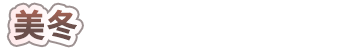
<style>
.page{position:relative;width:360px;height:50px;background:#ffffff}
.page>*{position:absolute;margin:0}
.t1{font:32px "SourceHanSansSC-Bold";font-weight:bold}
</style>
<div class="page">
<p class="t1" style="left:13px;top:9px;width:64px;height:32px">美冬</p>
</div>
